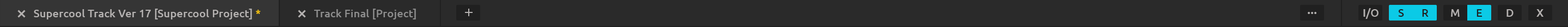
<style>
.page{position:relative;width:1568px;height:27px;background:#2a2a2a}
.page>*{position:absolute;margin:0}
.t1{font:10.9px "Ubuntu-Medium";letter-spacing:0.01em;color:#b5b2b1}
.t2{font:10.9px "Ubuntu-Medium";letter-spacing:0.01em;color:#ffc907}
.t3{font:10.9px "Ubuntu-Medium";letter-spacing:0.01em;color:#8d8d8d}
.t4{font:10.9px "Ubuntu-Medium";letter-spacing:0.01em;color:#202020}
</style>
<div class="page">
<p class="t1" style="left:34px;top:9px;width:227px;height:11px">Supercool Track Ver 17 [Supercool Project] <span class="t2">*</span></p>
<p class="t3" style="left:314px;top:9px;width:102px;height:11px">Track Final [Project]</p>
<p class="t1" style="left:1363px;top:8px;width:16px;height:11px">I/O</p>
<p class="t4" style="left:1398px;top:9px;width:6px;height:8px">S</p>
<p class="t4" style="left:1422px;top:9px;width:7px;height:8px">R</p>
<p class="t1" style="left:1451px;top:9px;width:9px;height:8px">M</p>
<p class="t4" style="left:1477px;top:9px;width:5px;height:8px">E</p>
<p class="t1" style="left:1506px;top:9px;width:8px;height:8px">D</p>
<p class="t1" style="left:1536px;top:9px;width:7px;height:8px">X</p>
</div>
